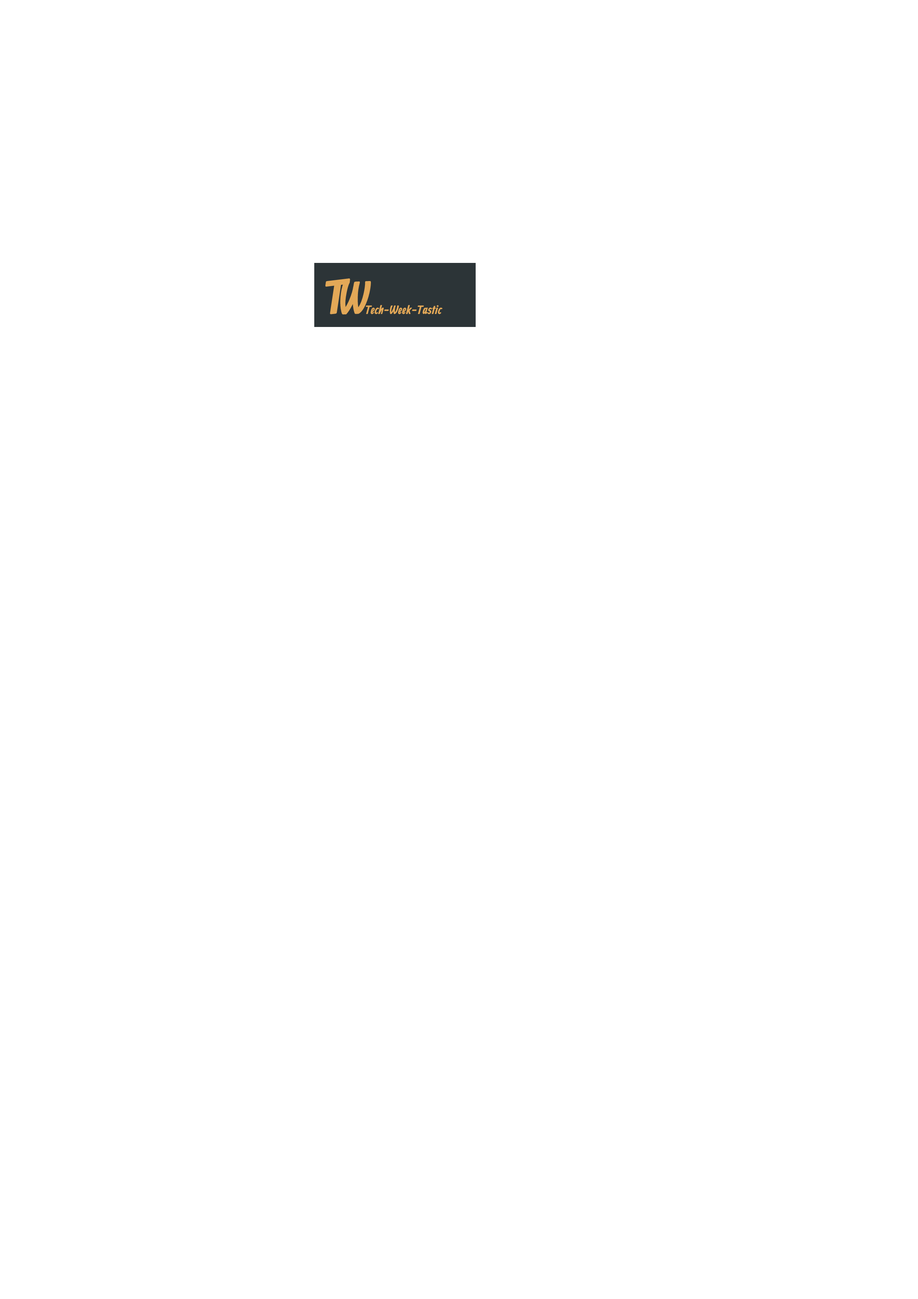
<style>
.page{position:relative;width:918px;height:1299px;background:#ffffff}
.page>*{position:absolute;margin:0}
.t1{font:47.3px "Allan-Bold";color:#e3a857;scale:1.09 1}
.t2{font:45.7px "Allan-Bold";color:#e3a857;scale:0.94 1}
.t3{font:12.1px "Allan-Bold";color:#e3a857}
</style>
<div class="page">
<p class="t1" style="left:325px;top:278px;width:25px;height:36px;rotate:-7deg">T</p>
<p class="t2" style="left:340px;top:281px;width:31px;height:34px;rotate:-2deg">W</p>
<p class="t3" style="left:366px;top:305px;width:77px;height:9px">Tech-Week-Tastic</p>
</div>
